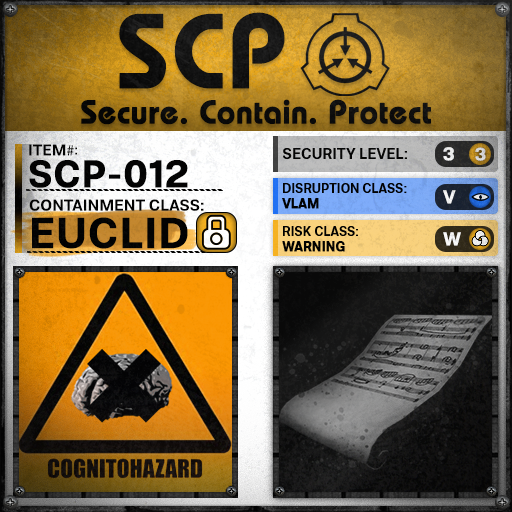
<style>
.page{position:relative;width:512px;height:512px}
.page>*{position:absolute;margin:0}
.t1{font:105.8px "BauhausLT-Demi";color:#000000;font-weight:bold}
.t2{font:33px "BauhausLT-Demi";color:#000000;font-weight:bold}
.t3{font:15.7px "Molde-Semibold";color:#000000}
.t4{font:15.7px "MyriadPro-Regular";color:#000000}
.t5{font:13.7px "Molde-Semibold";color:#000000}
.t6{font:15px "Molde-Semibold";color:#000000}
.t7{font:18.6px "Molde-Semibold";color:#ffffff;font-weight:bold}
.t8{font:17.8px "Molde-Semibold";color:#d6d7d7;font-weight:bold}
.t9{font:38.2px "Molde-Semibold";color:#000000;font-weight:bold}
.t10{font:12.8px "Molde-Semibold";color:#000000}
.t11{font:12.8px "Molde-Semibold";color:#000000;font-weight:bold}
.t12{font:15.9px "Molde-Semibold";color:#000000}
.t13{font:42.8px "Molde-Semibold";color:#000000;font-weight:bold}
</style>
<div class="page">
<p class="t1" style="left:119px;top:12px;width:166px;height:77px">SCP</p>
<p class="t2" style="left:81px;top:99px;width:350px;height:26px">Secure. Contain. Protect</p>
<p class="t3" style="left:29px;top:144px;width:45px;height:12px">ITEM<span class="t4">#</span></p>
<p class="t5" style="left:75px;top:147px;width:2px;height:8px">:</p>
<p class="t6" style="left:283px;top:148px;width:124px;height:11px">SECURITY LEVEL:</p>
<p class="t7" style="left:443px;top:147px;width:11px;height:14px">3</p>
<p class="t8" style="left:475px;top:147px;width:11px;height:14px">3</p>
<p class="t9" style="left:29px;top:160px;width:159px;height:28px">SCP-012</p>
<p class="t10" style="left:282px;top:183px;width:125px;height:26px">DISRUPTION CLASS:<br><span class="t11">VLAM</span></p>
<p class="t7" style="left:443px;top:190px;width:13px;height:14px">V</p>
<p class="t12" style="left:29px;top:199px;width:175px;height:12px">CONTAINMENT CLASS:</p>
<p class="t13" style="left:32px;top:217px;width:156px;height:32px">EUCLID</p>
<p class="t10" style="left:282px;top:226px;width:76px;height:26px">RISK CLASS:<br><span class="t11">WARNING</span></p>
<p class="t7" style="left:443px;top:232px;width:18px;height:14px">W</p>
</div>
